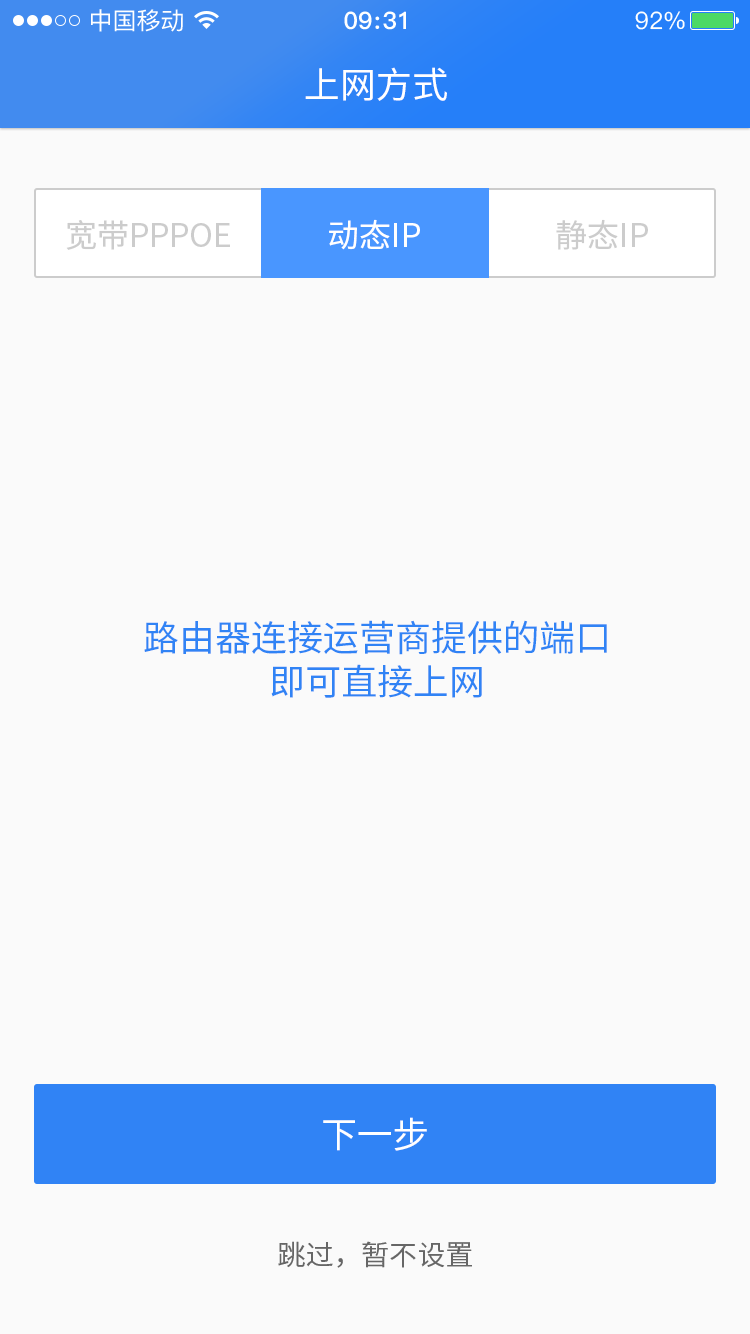
<style>
.page{position:relative;width:750px;height:1334px;background:#fafafa}
.page>*{position:absolute;margin:0}
.t1{font:36px "SourceHanSansCN-Regular";color:#ffffff}
.t2{font:32px "SourceHanSansCN-Regular";color:#cccccc}
.t3{font:32px "SourceHanSansCN-Regular";color:#ffffff}
.t4{font:36px "SourceHanSansCN-Regular";color:#3083f5}
.t5{font:28px "SourceHanSansCN-Regular";color:#666666}
</style>
<div class="page">
<p class="t1" style="left:305px;top:67px;width:142px;height:34px">上网方式</p>
<p class="t2" style="left:66px;top:220px;width:164px;height:30px">宽带PPPOE</p>
<p class="t3" style="left:329px;top:219px;width:91px;height:31px">动态IP</p>
<p class="t2" style="left:556px;top:219px;width:92px;height:31px">静态IP</p>
<p class="t4" style="left:144px;top:620px;width:463px;height:78px;text-align:center">路由器连接运营商提供的端口<br>即可直接上网</p>
<p class="t1" style="left:323px;top:1117px;width:104px;height:34px">下一步</p>
<p class="t5" style="left:278px;top:1241px;width:194px;height:27px">跳过，暂不设置</p>
</div>
